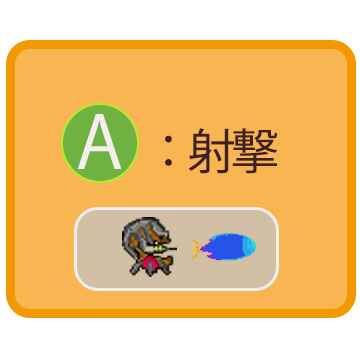
<style>
.page{position:relative;width:360px;height:360px;background:#f8b551}
.page>*{position:absolute;margin:0}
.t1{font:48px "KozGoPr6N-Regular";letter-spacing:-0.1em;color:#3e2020}
.t2{font:72px "KozGoPr6N-Regular";letter-spacing:-0.1em;color:#030303}
.t3{font:72px "KozGoPr6N-Regular";letter-spacing:-0.1em;color:#f4eeee}
</style>
<div class="page">
<p class="t1" style="left:77px;top:114px;width:201px;height:60px"><span class="t2">   </span><span class="t3">A   </span>：射撃</p>
</div>
